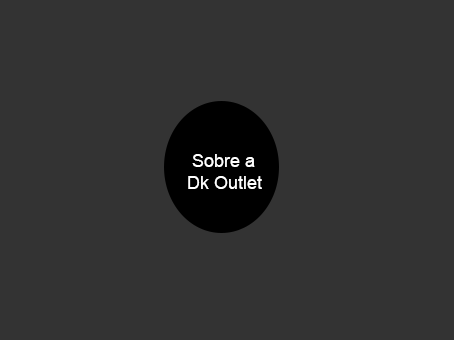
<style>
.page{position:relative;width:454px;height:340px;background:#333333}
.page>*{position:absolute;margin:0}
.t1{font:18px "ArialMT";color:#ffffff}
.t2{font:12px "MyriadPro-Regular";color:#ffffff}
</style>
<div class="page">
<p class="t1" style="left:188px;top:154px;width:74px;height:35px"><span class="t2"><br></span>Sobre a<br> Dk Outlet</p>
</div>
